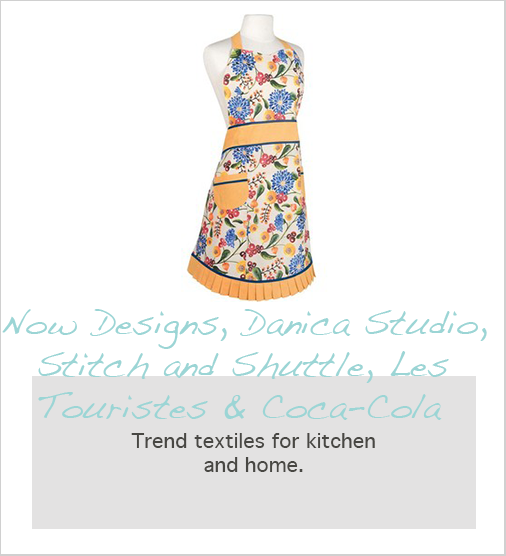
<style>
.page{position:relative;width:506px;height:556px;background:#ffffff}
.page>*{position:absolute;margin:0}
.t1{font:35px "Handwriting-Dakota";color:#9bd5d5}
.t2{font:20px "Geneva";color:#484743}
</style>
<div class="page">
<p class="t1" style="left:2px;top:309px;width:485px;height:111px">Now Designs, Danica Studio, <br> Stitch and Shuttle, Les <br> Touristes &amp; Coca-Cola</p>
<p class="t2" style="left:131px;top:433px;width:244px;height:39px;text-align:center">Trend textiles for kitchen<br>and home.</p>
</div>
